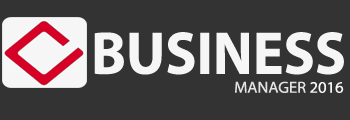
<style>
.page{position:relative;width:350px;height:120px;background:#333333}
.page>*{position:absolute;margin:0}
.t1{font:60.7px "MyriadPro-Bold";color:#f6f6f6;scale:0.95 1}
.t2{font:16.1px "MyriadPro-Regular";color:#e2e3e3;scale:1.03 1}
.t3{font:16.1px "MyriadPro-Regular";color:#f6f6f6;scale:1.03 1}
</style>
<div class="page">
<p class="t1" style="left:94px;top:32px;width:250px;height:43px">BUSINESS</p>
<p class="t2" style="left:235px;top:81px;width:109px;height:12px">MANAGER <span class="t3">2016</span></p>
</div>
